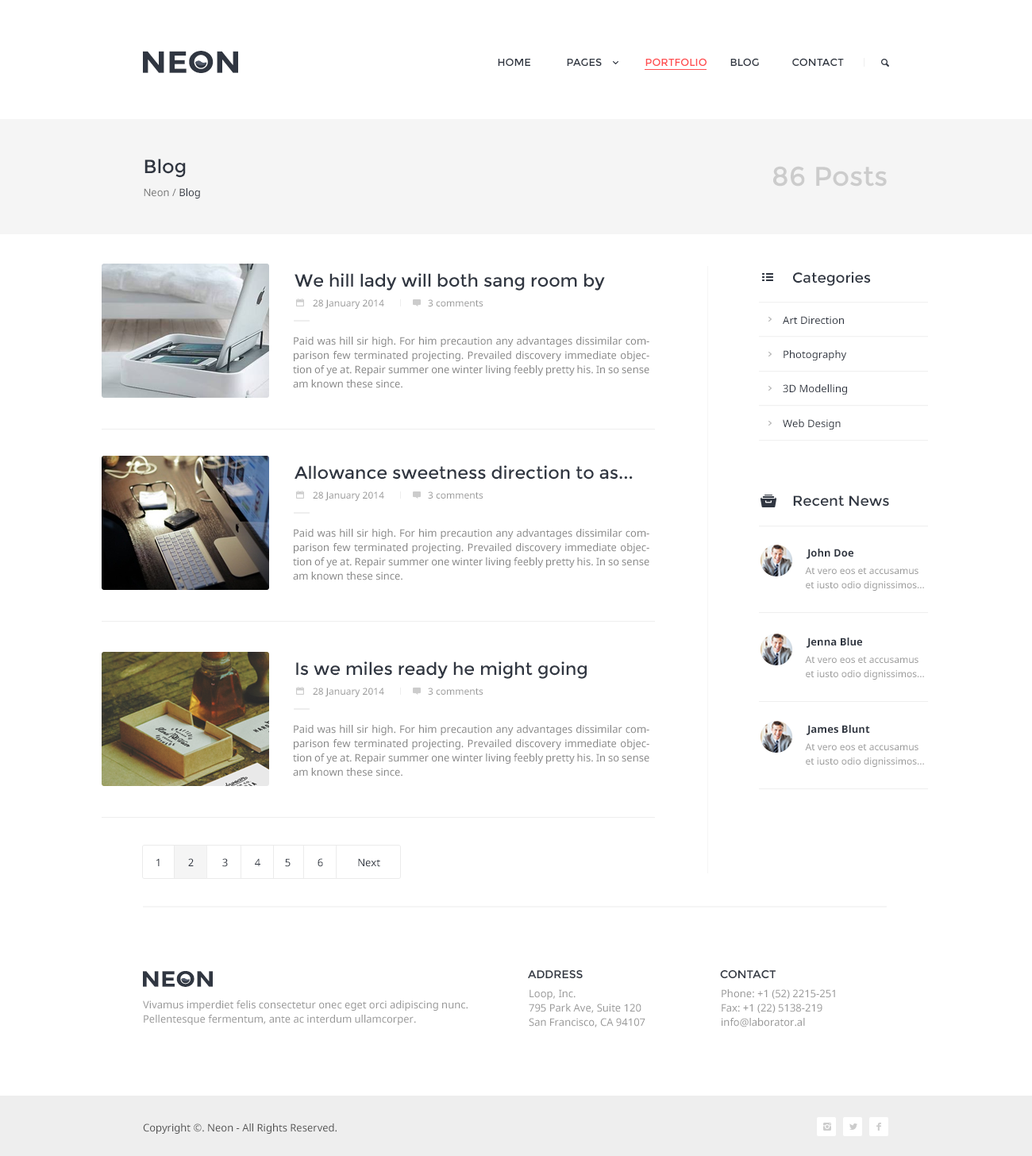
<style>
.page{position:relative;width:1032px;height:1156px;background:#ffffff}
.page>*{position:absolute;margin:0}
.t1{font:30.8px "Montserrat-Bold";color:#303641;scale:1.06 1}
.t2{font:10.3px "Montserrat-Regular";color:#303641;text-transform:uppercase}
.t3{font:10.3px "Montserrat-Regular";color:#ff4e50;text-transform:uppercase}
.t4{font:19px "Montserrat-Regular";color:#303641}
.t5{font:27px "Montserrat-Regular";color:#cccccc}
.t6{font:10.3px "NotoSans";color:#777777}
.t7{font:10.3px "NotoSans";color:#303641}
.t8{font:17.5px "Montserrat-Regular";color:#303641}
.t9{font:14.3px "Montserrat-Regular";color:#303641}
.t10{font:9.5px "NotoSans";color:#999999}
.t11{font:10.3px/14.3px "NotoSans";color:#888888}
.t12{font:10.3px "NotoSans-Bold";color:#303641}
.t13{font:9.5px/14.3px "NotoSans";color:#999999}
.t14{font:22px "Montserrat-Bold";color:#303641;scale:1.08 1}
.t15{font:11.1px "Montserrat-Regular";color:#303641;text-transform:uppercase}
.t16{font:10.3px/14.3px "NotoSans";color:#999999}
.t17{font:10.3px "NotoSans";color:#555555}
</style>
<div class="page">
<p class="t1" style="left:143px;top:51px;width:95px;height:22px">NEON</p>
<p class="t2" style="left:498px;top:58px;width:32px;height:8px">Home</p>
<p class="t2" style="left:567px;top:58px;width:35px;height:8px">Pages</p>
<p class="t3" style="left:645px;top:58px;width:61px;height:8px">Portfolio</p>
<p class="t2" style="left:730px;top:58px;width:29px;height:8px">Blog</p>
<p class="t2" style="left:792px;top:58px;width:52px;height:8px">Contact</p>
<p class="t4" style="left:144px;top:159px;width:42px;height:19px">Blog</p>
<p class="t5" style="left:773px;top:166px;width:114px;height:21px">86 Posts</p>
<p class="t6" style="left:144px;top:188px;width:56px;height:10px">Neon / <span class="t7">Blog</span></p>
<p class="t8" style="left:294px;top:273px;width:311px;height:17px">We hill lady will both sang room by</p>
<p class="t9" style="left:793px;top:271px;width:78px;height:15px">Categories</p>
<p class="t10" style="left:313px;top:299px;width:71px;height:10px">28 January 2014</p>
<p class="t10" style="left:428px;top:299px;width:55px;height:7px">3 comments</p>
<p class="t7" style="left:783px;top:316px;width:61px;height:8px">Art Direction</p>
<p class="t11" style="left:293px;top:337px;width:356px;height:51px;text-align:justify">Paid was hill sir high. For him precaution any advantages dissimilar comparison few terminated projecting. Prevailed discovery immediate objection of ye at. Repair summer one winter living feebly pretty his. In so sense am known these since.</p>
<p class="t7" style="left:783px;top:350px;width:63px;height:10px">Photography</p>
<p class="t7" style="left:783px;top:384px;width:64px;height:10px">3D Modelling</p>
<p class="t7" style="left:783px;top:419px;width:58px;height:10px">Web Design</p>
<p class="t8" style="left:294px;top:465px;width:339px;height:14px">Allowance sweetness direction to as...</p>
<p class="t10" style="left:313px;top:491px;width:71px;height:10px">28 January 2014</p>
<p class="t10" style="left:428px;top:491px;width:55px;height:7px">3 comments</p>
<p class="t9" style="left:793px;top:495px;width:96px;height:11px">Recent News</p>
<p class="t11" style="left:293px;top:529px;width:356px;height:51px;text-align:justify">Paid was hill sir high. For him precaution any advantages dissimilar comparison few terminated projecting. Prevailed discovery immediate objection of ye at. Repair summer one winter living feebly pretty his. In so sense am known these since.</p>
<p class="t12" style="left:806px;top:548px;width:47px;height:11px">John Doe</p>
<p class="t13" style="left:805px;top:567px;width:119px;height:24px">At vero eos et accusamus et iusto odio dignissimos...</p>
<p class="t12" style="left:806px;top:637px;width:56px;height:11px">Jenna Blue</p>
<p class="t8" style="left:296px;top:661px;width:291px;height:18px">Is we miles ready he might going</p>
<p class="t13" style="left:805px;top:656px;width:119px;height:23px">At vero eos et accusamus et iusto odio dignissimos...</p>
<p class="t10" style="left:313px;top:687px;width:71px;height:10px">28 January 2014</p>
<p class="t10" style="left:428px;top:687px;width:55px;height:8px">3 comments</p>
<p class="t11" style="left:293px;top:725px;width:356px;height:51px;text-align:justify">Paid was hill sir high. For him precaution any advantages dissimilar comparison few terminated projecting. Prevailed discovery immediate objection of ye at. Repair summer one winter living feebly pretty his. In so sense am known these since.</p>
<p class="t12" style="left:806px;top:725px;width:64px;height:10px">James Blunt</p>
<p class="t13" style="left:805px;top:743px;width:119px;height:24px">At vero eos et accusamus et iusto odio dignissimos...</p>
<p class="t7" style="left:156px;top:858px;width:4px;height:8px">1</p>
<p class="t7" style="left:188px;top:858px;width:6px;height:8px">2</p>
<p class="t7" style="left:222px;top:858px;width:6px;height:9px">3</p>
<p class="t7" style="left:255px;top:858px;width:5px;height:8px">4</p>
<p class="t7" style="left:285px;top:858px;width:5px;height:9px">5</p>
<p class="t7" style="left:317px;top:858px;width:6px;height:9px">6</p>
<p class="t7" style="left:358px;top:858px;width:22px;height:9px">Next</p>
<p class="t14" style="left:143px;top:971px;width:70px;height:16px">NEON</p>
<p class="t15" style="left:528px;top:969px;width:55px;height:10px">address</p>
<p class="t15" style="left:720px;top:969px;width:55px;height:10px">contact</p>
<p class="t16" style="left:529px;top:989px;width:116px;height:38px">Loop, Inc. <br>795 Park Ave, Suite 120 <br>San Francisco, CA 94107</p>
<p class="t16" style="left:721px;top:989px;width:114px;height:38px">Phone: +1 (52) 2215-251<br>Fax: +1 (22) 5138-219<br>info@laborator.al</p>
<p class="t16" style="left:143px;top:1000px;width:324px;height:25px">Vivamus imperdiet felis consectetur onec eget orci adipiscing nunc. <br>Pellentesque fermentum, ante ac interdum ullamcorper.</p>
<p class="t17" style="left:143px;top:1123px;width:194px;height:10px">Copyright ©. Neon - All Rights Reserved.</p>
</div>
